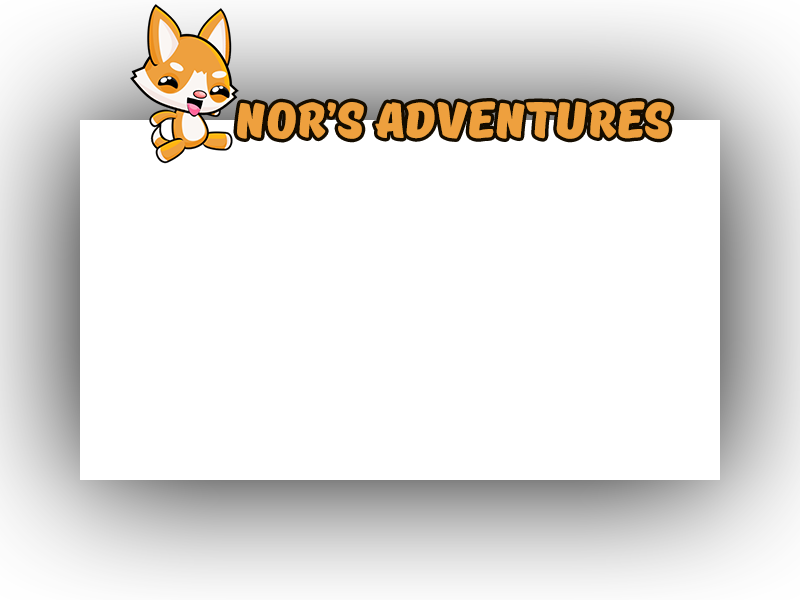
<style>
.page{position:relative;width:800px;height:600px;background:#ffffff}
.page>*{position:absolute;margin:0}
.t1{font:50px "TTMastersDEMOBlack";color:#eea03e}
</style>
<div class="page">
<p class="t1" style="left:237px;top:101px;width:434px;height:38px">NOR’S ADVENTURES</p>
<p class="t1" style="left:237px;top:101px;width:434px;height:38px">NOR’S ADVENTURES</p>
</div>
